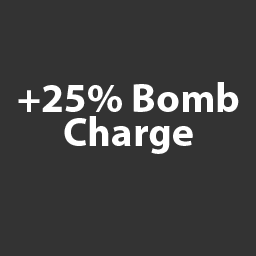
<style>
.page{position:relative;width:256px;height:256px;background:#333333}
.page>*{position:absolute;margin:0}
.t1{font:41px/33.4px "MyriadPro-Bold";color:#ffffff}
</style>
<div class="page">
<p class="t1" style="left:18px;top:82px;width:221px;height:72px;text-align:center">+25% Bomb<br>Charge</p>
</div>
